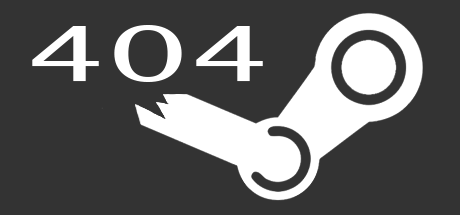
<style>
.page{position:relative;width:460px;height:215px;background:#333333}
.page>*{position:absolute;margin:0}
.t1{font:76px "LucidaConsole";color:#ffffff;scale:1.79 1}
</style>
<div class="page">
<p class="t1" style="left:32px;top:25px;width:231px;height:57px">404</p>
</div>
